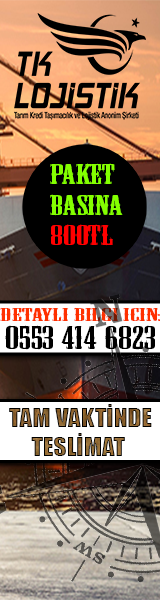
<style>
.page{position:relative;width:160px;height:600px}
.page>*{position:absolute;margin:0}
.t1{font:25.7px "MesquiteStd";color:#84ff00;scale:1.87 1}
.t2{font:25.7px "MesquiteStd";color:#ff0000;scale:1.87 1}
.t3{font:16.4px "MesquiteStd";color:#ff3000;scale:2.49 1}
.t4{font:30.2px "MesquiteStd";color:#000000;scale:1.77 1}
.t5{font:23.8px "Impact";scale:1.07 1}
</style>
<div class="page">
<p class="t1" style="left:50px;top:163px;width:73px;height:83px">PAKET <br>BASINA <br><span class="t2">800TL</span></p>
<p class="t3" style="left:0px;top:307px;width:162px;height:15px">DETAYLI BILGI ICIN:</p>
<p class="t4" style="left:5px;top:325px;width:150px;height:25px">0553 414 6823</p>
<p class="t5" style="left:9px;top:404px;width:143px;height:52px">TAM VAKTİNDE <br>     TESLİMAT</p>
</div>
